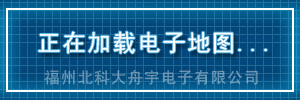
<style>
.page{position:relative;width:300px;height:100px}
.page>*{position:absolute;margin:0}
.t1{font:24px "SimHei";letter-spacing:0.04em;color:#ffffff}
.t2{font:16px "SimHei";letter-spacing:0.04em;color:#6894b2}
</style>
<div class="page">
<p class="t1" style="left:38px;top:31px;width:229px;height:23px">正在加载电子地图...</p>
<p class="t2" style="left:44px;top:70px;width:214px;height:15px">福州北科大舟宇电子有限公司</p>
</div>
